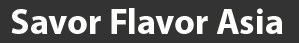
<style>
.page{position:relative;width:299px;height:43px;background:#333333}
.page>*{position:absolute;margin:0}
.t1{font:36px "MyriadPro-Bold";color:#fefefd}
</style>
<div class="page">
<p class="t1" style="left:11px;top:8px;width:272px;height:26px">Savor Flavor Asia</p>
</div>
